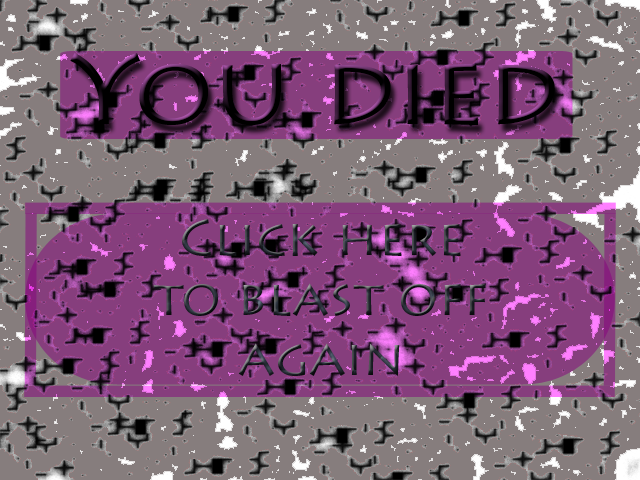
<style>
.page{position:relative;width:640px;height:480px;background:#867d7d}
.page>*{position:absolute;margin:0}
.t1{font:100px "LithosPro-Regular";color:#000000;scale:1.03 1}
.t2{font:50px "LithosPro-Regular";scale:1.03 1}
</style>
<div class="page">
<p class="t1" style="left:70px;top:53px;width:485px;height:73px">You died</p>
<p class="t2" style="left:153px;top:219px;width:333px;height:157px;text-align:center">Click here<br>to blast off<br>again</p>
</div>
